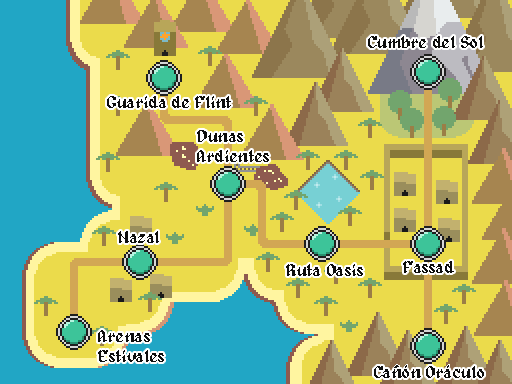
<style>
.page{position:relative;width:512px;height:384px;background:#ebdb4b}
.page>*{position:absolute;margin:0}
.t1{font:16.7px "Alagard";color:#0d0d0d}
</style>
<div class="page">
<p class="t1" style="left:368px;top:36px;width:115px;height:12px">Cumbre del Sol</p>
<p class="t1" style="left:107px;top:96px;width:124px;height:12px">Guarida de Flint</p>
<p class="t1" style="left:197px;top:130px;width:72px;height:32px">Dunas<br>Ardientes</p>
<p class="t1" style="left:118px;top:231px;width:41px;height:12px">Nazal</p>
<p class="t1" style="left:286px;top:264px;width:77px;height:12px">Ruta Oasis</p>
<p class="t1" style="left:403px;top:261px;width:51px;height:12px">Fassad</p>
<p class="t1" style="left:98px;top:330px;width:66px;height:32px">Arenas <br>Estivales</p>
<p class="t1" style="left:374px;top:366px;width:110px;height:12px">Canon Oraculo</p>
</div>
